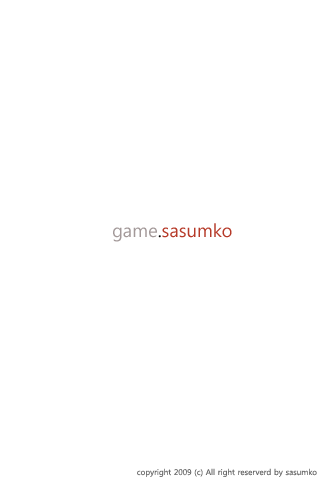
<style>
.page{position:relative;width:320px;height:480px;background:#ffffff}
.page>*{position:absolute;margin:0}
.t1{font:18px "MalgunGothicRegular";color:#b63a29}
.t2{font:18px "MalgunGothicRegular";color:#a39999}
.t3{font:18px "MalgunGothicRegular";color:#000000}
.t4{font:8px "MalgunGothicRegular";color:#6a6a6a}
</style>
<div class="page">
<p class="t1" style="left:113px;top:223px;width:119px;height:19px"><span class="t2">game</span><span class="t3">.</span>sasumko</p>
<p class="t4" style="left:137px;top:468px;width:180px;height:9px">copyright 2009 (c) All right reserverd by sasumko</p>
</div>
